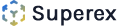
<style>
.page{position:relative;width:120px;height:26px;background:#ffffff}
.page>*{position:absolute;margin:0}
.t1{font:22.3px "Karla-Regular";letter-spacing:-0.005em;color:#161c2d;font-weight:bold}
</style>
<div class="page">
<p class="t1" style="left:32px;top:5px;width:85px;height:21px">Superex</p>
</div>
